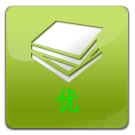
<style>
.page{position:relative;width:135px;height:135px}
.page>*{position:absolute;margin:0}
.t1{font:26px "STFangsong";letter-spacing:0.1em;color:#00e400;font-weight:bold}
</style>
<div class="page">
<p class="t1" style="left:55px;top:87px;width:24px;height:26px">优</p>
</div>
